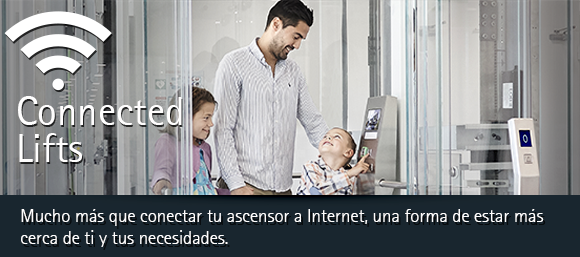
<style>
.page{position:relative;width:580px;height:257px}
.page>*{position:absolute;margin:0}
.t1{font:40.8px/37.2px "AgfaRotisSansSerif";color:#fffefe}
.t2{font:18.9px/22.1px "AgfaRotisSansSerifLight";color:#fffefe}
</style>
<div class="page">
<p class="t1" style="left:18px;top:96px;width:164px;height:66px">Connected<br>Lifts</p>
<p class="t2" style="left:21px;top:209px;width:523px;height:38px">Mucho más que conectar tu ascensor a Internet, una forma de estar más cerca de ti y tus necesidades.</p>
</div>
